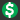
<style>
.page{position:relative;width:20px;height:20px;background:#333333}
.page>*{position:absolute;margin:0}
.t1{font:18px "CourierNewPS-BoldMT";letter-spacing:0.02em;color:#ffffff}
</style>
<div class="page">
<p class="t1" style="left:5px;top:2px;width:9px;height:16px">$</p>
</div>
